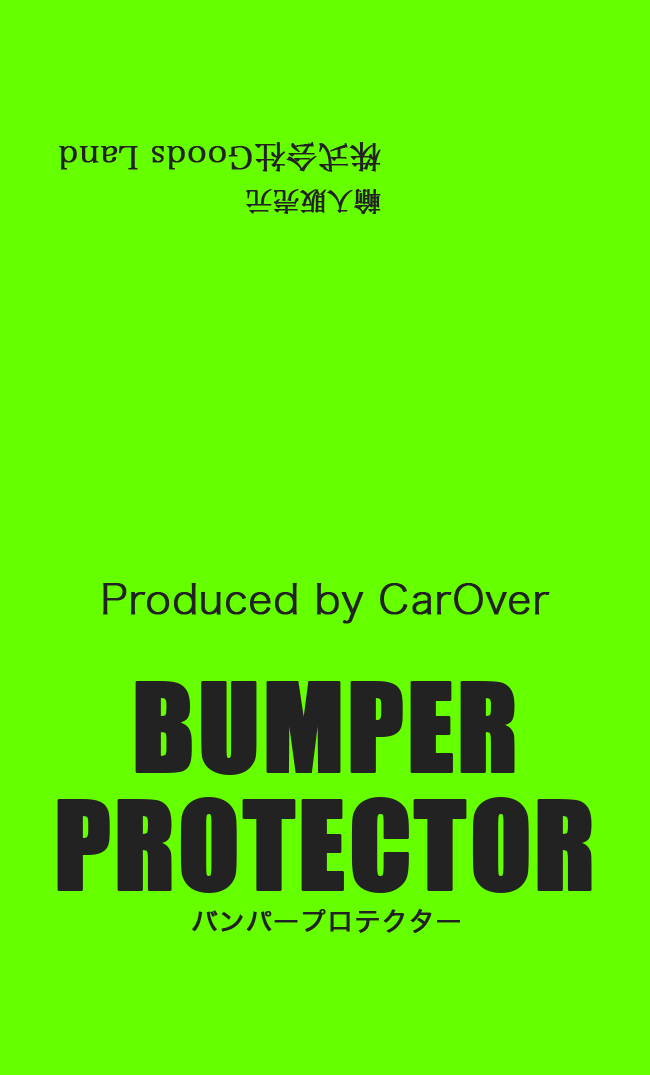
<style>
.page{position:relative;width:650px;height:1075px;background:#66ff00}
.page>*{position:absolute;margin:0}
.t1{font:31px "HiraginoMin-W3-90msp-RKSJ-H";color:#222222;font-weight:bold}
.t2{font:26.4px "HiraginoMin-W3-90msp-RKSJ-H";color:#222222;font-weight:bold}
.t3{font:40.7px "HiraginoKaku-W2-90msp-RKSJ-H";color:#222222;font-weight:bold}
.t4{font:113.5px/118.2px "Impact";color:#222222;font-weight:bold}
.t5{font:26.5px "HiraginoKaku-W4-90msp-RKSJ-H";color:#222222;font-weight:bold}
</style>
<div class="page">
<p class="t1" style="left:59px;top:142px;width:322px;height:30px;rotate:180deg">株式会社Goods Land</p>
<p class="t2" style="left:246px;top:189px;width:135px;height:25px;rotate:180deg">輸入販売元</p>
<p class="t3" style="left:103px;top:583px;width:447px;height:41px">Produced by CarOver</p>
<p class="t4" style="left:57px;top:681px;width:535px;height:212px;text-align:center">BUMPER<br>PROTECTOR</p>
<p class="t5" style="left:192px;top:909px;width:268px;height:24px">バンパープロテクター</p>
</div>
